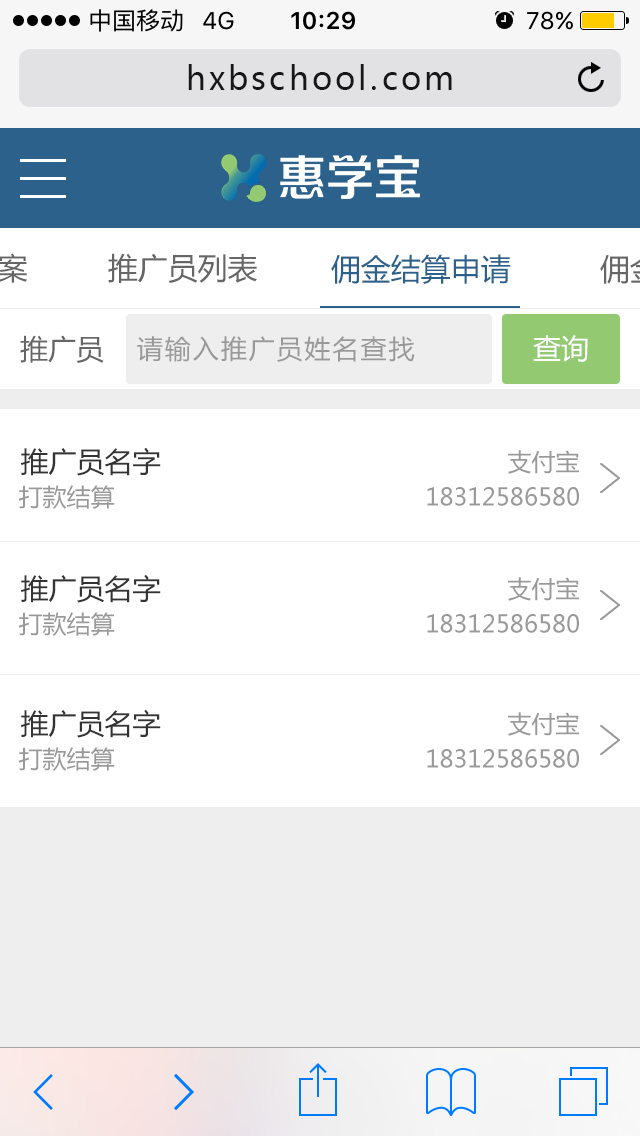
<style>
.page{position:relative;width:640px;height:1136px;background:#ffffff}
.page>*{position:absolute;margin:0}
.t1{font:32px "MicrosoftYaHei";letter-spacing:0.1em;color:#171717}
.t2{font:30px "MicrosoftYaHei";color:#666666}
.t3{font:30px "MicrosoftYaHei";color:#2c618b}
.t4{font:28px "MicrosoftYaHei";color:#666666}
.t5{font:26px "MicrosoftYaHei";letter-spacing:0.075em;color:#999999}
.t6{font:28px "MicrosoftYaHei";color:#ffffff}
.t7{font:28px "MicrosoftYaHei";color:#333333}
.t8{font:24px "MicrosoftYaHei";color:#999999}
</style>
<div class="page">
<p class="t1" style="left:188px;top:64px;width:264px;height:26px">hxbschool.com</p>
<p class="t2" style="left:108px;top:253px;width:149px;height:30px">推广员列表</p>
<p class="t3" style="left:331px;top:254px;width:180px;height:30px">佣金结算申请</p>
<p class="t4" style="left:20px;top:335px;width:84px;height:28px">推广员</p>
<p class="t5" style="left:137px;top:336px;width:278px;height:26px">请输入推广员姓名查找</p>
<p class="t6" style="left:533px;top:335px;width:55px;height:27px">查询</p>
<p class="t7" style="left:21px;top:447px;width:140px;height:29px">推广员名字</p>
<p class="t8" style="left:508px;top:450px;width:71px;height:24px">支付宝</p>
<p class="t8" style="left:18px;top:485px;width:97px;height:24px">打款结算</p>
<p class="t8" style="left:427px;top:487px;width:152px;height:19px">18312586580</p>
<p class="t7" style="left:21px;top:574px;width:140px;height:29px">推广员名字</p>
<p class="t8" style="left:508px;top:577px;width:71px;height:24px">支付宝</p>
<p class="t8" style="left:18px;top:612px;width:97px;height:24px">打款结算</p>
<p class="t8" style="left:427px;top:614px;width:152px;height:19px">18312586580</p>
<p class="t7" style="left:21px;top:709px;width:140px;height:29px">推广员名字</p>
<p class="t8" style="left:508px;top:712px;width:71px;height:24px">支付宝</p>
<p class="t8" style="left:18px;top:747px;width:97px;height:24px">打款结算</p>
<p class="t8" style="left:427px;top:749px;width:152px;height:19px">18312586580</p>
</div>
